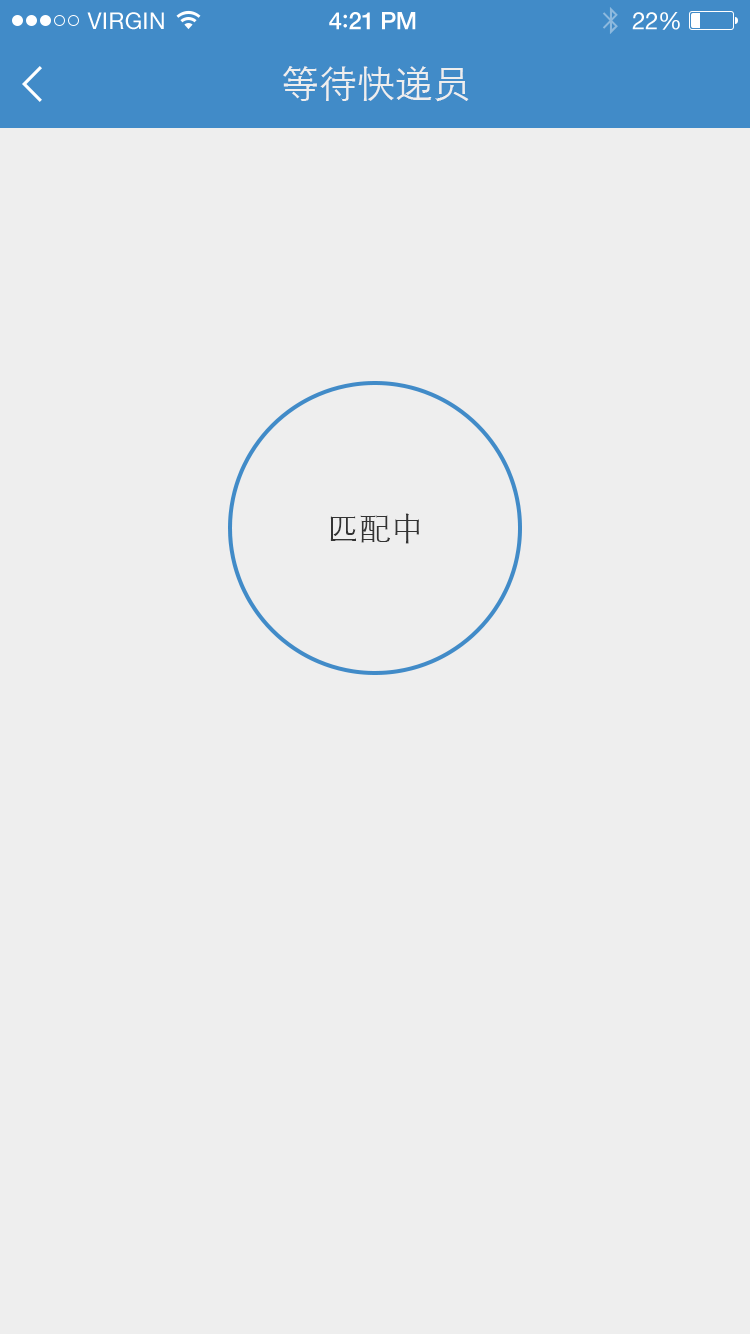
<style>
.page{position:relative;width:750px;height:1334px;background:#eeeeee}
.page>*{position:absolute;margin:0}
.t1{font:23px "HelveticaNeue";letter-spacing:0.02em;color:#ffffff}
.t2{font:24px "HelveticaNeue-Medium";letter-spacing:-0.02em;color:#ffffff}
.t3{font:26px "Avenir-Medium";letter-spacing:-0.02em;color:#ffffff}
.t4{font:24px "HelveticaNeue";letter-spacing:-0.02em;color:#ffffff}
.t5{font:38px "STXihei";color:#eeeeee}
.t6{font:32px "STXihei";color:#333333}
</style>
<div class="page">
<p class="t1" style="left:87px;top:12px;width:77px;height:18px">VIRGIN</p>
<p class="t2" style="left:329px;top:12px;width:87px;height:18px">4<span class="t3">:</span>21 PM</p>
<p class="t4" style="left:632px;top:12px;width:48px;height:18px">22%</p>
<p class="t5" style="left:283px;top:66px;width:186px;height:36px">等待快递员</p>
<p class="t6" style="left:330px;top:513px;width:89px;height:31px">匹配中</p>
</div>
